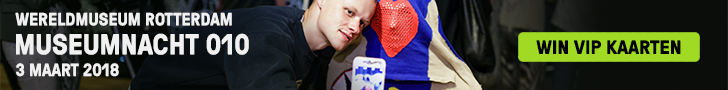
<style>
.page{position:relative;width:728px;height:90px}
.page>*{position:absolute;margin:0}
.t1{font:17.8px "GTPressura-Bold";color:#f7f7f7}
.t2{font:29.1px "GTPressura-Bold";color:#f7f7f7}
.t3{font:19.1px "GTPressura-Bold";color:#000000;scale:1.07 1}
</style>
<div class="page">
<p class="t1" style="left:15px;top:12px;width:217px;height:14px">WERELDMUSEUM ROTTERDAM</p>
<p class="t2" style="left:16px;top:33px;width:233px;height:22px">MUSEUMNACHT 010</p>
<p class="t3" style="left:536px;top:40px;width:145px;height:14px">WIN VIP KAARTEN</p>
<p class="t1" style="left:16px;top:63px;width:103px;height:14px">3 MAART 2018</p>
</div>
